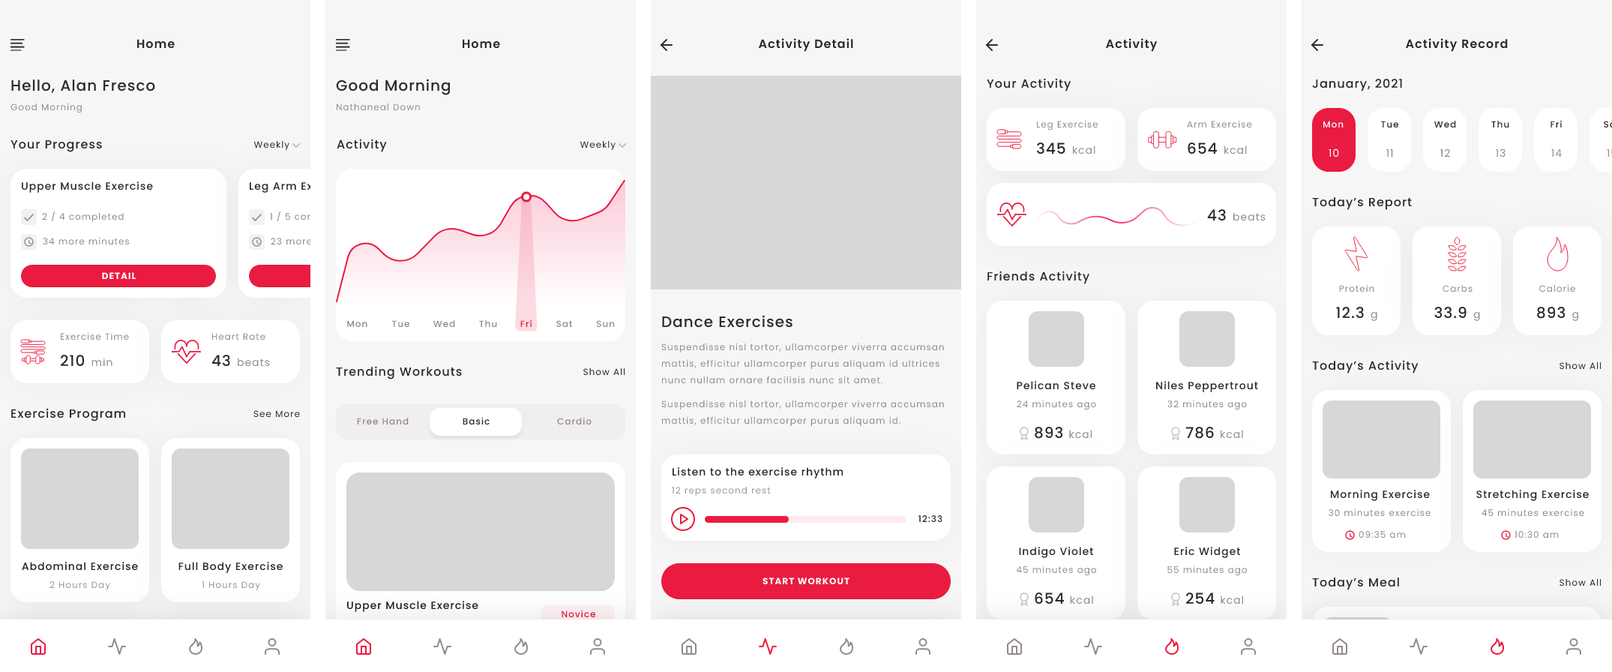
<style>
.page{position:relative;width:1612px;height:672px;background:#ffffff}
.page>*{position:absolute;margin:0}
.t1{font:12px "Poppins-SemiBold";letter-spacing:0.063em;color:#2f2b2c}
.t2{font:12px "Poppins-Medium";letter-spacing:0.063em;color:#2f2b2c}
.t3{font:15px "Poppins-Medium";letter-spacing:0.05em;color:#2f2b2c}
.t4{font:9px "Poppins-Regular";letter-spacing:0.083em;color:#938b8c}
.t5{font:9px "Poppins-Medium";letter-spacing:0.083em;color:#ffffff}
.t6{font:9px "Poppins-Medium";letter-spacing:0.083em;color:#2f2b2c}
.t7{font:9px "Poppins-Regular";letter-spacing:0.083em;color:#2f2b2c}
.t8{font:10.5px "Poppins-Regular";letter-spacing:0.071em;color:#938b8c}
.t9{font:10.5px "Poppins-Regular";letter-spacing:0.071em;color:#ffffff}
.t10{font:10.5px "Poppins-Medium";letter-spacing:0.071em;color:#2f2b2c}
.t11{font:9px "Poppins-Regular";letter-spacing:0.083em;color:#ffffff}
.t12{font:9px "Poppins-Regular";letter-spacing:0.083em}
.t13{font:9px "Poppins-Bold";letter-spacing:0.083em;color:#ffffff;text-transform:uppercase}
.t14{font:9px "Poppins-Medium";letter-spacing:0.083em;color:#938b8c}
.t15{font:9px "Poppins-Medium";letter-spacing:0.083em;color:#ea1b41}
.t16{font:9px/16.5px "Poppins-Regular";letter-spacing:0.083em;color:#938b8c}
.t17{font:10.5px "Poppins-Medium";letter-spacing:0.071em;color:#27272a}
.t18{font:9px "Poppins-Regular";letter-spacing:0.083em;color:#99999f}
.t19{font:10.5px "Poppins-Regular";letter-spacing:0.083em;color:#938b8c}
.t20{font:10.5px "Poppins-Medium";letter-spacing:0.071em;color:#242221}
</style>
<div class="page">
<p class="t1" style="left:136px;top:39px;width:39px;height:10px">Home</p>
<p class="t1" style="left:462px;top:39px;width:38px;height:10px">Home</p>
<p class="t1" style="left:758px;top:38px;width:96px;height:14px">Activity Detail</p>
<p class="t1" style="left:1106px;top:38px;width:52px;height:14px">Activity</p>
<p class="t1" style="left:1406px;top:38px;width:102px;height:14px">Activity Record</p>
<p class="t2" style="left:987px;top:78px;width:85px;height:14px">Your Activity</p>
<p class="t3" style="left:11px;top:80px;width:144px;height:13px">Hello, Alan Fresco</p>
<p class="t3" style="left:336px;top:79px;width:115px;height:16px">Good Morning</p>
<p class="t2" style="left:1312px;top:79px;width:90px;height:13px">January, 2021</p>
<p class="t4" style="left:10px;top:103px;width:72px;height:10px">Good Morning</p>
<p class="t4" style="left:336px;top:104px;width:84px;height:7px">Nathaneal Down</p>
<p class="t4" style="left:1036px;top:120px;width:63px;height:10px">Leg Exercise</p>
<p class="t4" style="left:1187px;top:120px;width:65px;height:8px">Arm Exercise</p>
<p class="t5" style="left:1323px;top:121px;width:21px;height:7px">Mon</p>
<p class="t6" style="left:1381px;top:121px;width:19px;height:7px">Tue</p>
<p class="t6" style="left:1434px;top:121px;width:22px;height:7px">Wed</p>
<p class="t6" style="left:1492px;top:121px;width:18px;height:7px">Thu</p>
<p class="t6" style="left:1551px;top:120px;width:11px;height:8px">Fri</p>
<p class="t2" style="left:10px;top:140px;width:92px;height:12px">Your Progress</p>
<p class="t7" style="left:254px;top:141px;width:36px;height:10px">Weekly</p>
<p class="t2" style="left:337px;top:139px;width:50px;height:13px">Activity</p>
<p class="t7" style="left:580px;top:141px;width:36px;height:10px">Weekly</p>
<p class="t8" style="left:1036px;top:142px;width:60px;height:12px"><span class="t3">345 </span>kcal</p>
<p class="t8" style="left:1188px;top:142px;width:59px;height:12px"><span class="t3">654 </span>kcal</p>
<p class="t9" style="left:1329px;top:148px;width:11px;height:9px">10</p>
<p class="t8" style="left:1387px;top:148px;width:7px;height:9px">11</p>
<p class="t8" style="left:1441px;top:148px;width:9px;height:9px">12</p>
<p class="t8" style="left:1496px;top:148px;width:10px;height:10px">13</p>
<p class="t8" style="left:1552px;top:148px;width:10px;height:9px">14</p>
<p class="t10" style="left:22px;top:182px;width:131px;height:11px">Upper Muscle Exercise</p>
<p class="t10" style="left:250px;top:182px;width:99px;height:11px">Leg Arm Exercise</p>
<p class="t2" style="left:1312px;top:197px;width:100px;height:13px">Today’s Report</p>
<p class="t8" style="left:1208px;top:209px;width:58px;height:12px"><span class="t3">43 </span>beats</p>
<p class="t4" style="left:42px;top:211px;width:82px;height:12px">2 / 4 completed</p>
<p class="t11" style="left:270px;top:211px;width:80px;height:12px">1 / 5 completed</p>
<p class="t4" style="left:43px;top:237px;width:87px;height:8px">34 more minutes</p>
<p class="t12" style="left:271px;top:237px;width:86px;height:8px">23 more minutes</p>
<p class="t13" style="left:102px;top:272px;width:34px;height:7px">Detail</p>
<p class="t2" style="left:988px;top:271px;width:102px;height:13px">Friends Activity</p>
<p class="t4" style="left:1340px;top:284px;width:35px;height:8px">Protein</p>
<p class="t4" style="left:1443px;top:285px;width:30px;height:7px">Carbs</p>
<p class="t4" style="left:1540px;top:284px;width:36px;height:8px">Calorie</p>
<p class="t3" style="left:662px;top:315px;width:131px;height:13px">Dance Exercises</p>
<p class="t3" style="left:1336px;top:307px;width:42px;height:14px">12.3 <span class="t8">g</span></p>
<p class="t3" style="left:1435px;top:307px;width:45px;height:14px">33.9 <span class="t8">g</span></p>
<p class="t3" style="left:1538px;top:307px;width:41px;height:14px">893 <span class="t8">g</span></p>
<p class="t14" style="left:347px;top:320px;width:21px;height:8px">Mon</p>
<p class="t14" style="left:392px;top:320px;width:18px;height:8px">Tue</p>
<p class="t14" style="left:433px;top:320px;width:22px;height:8px">Wed</p>
<p class="t14" style="left:479px;top:320px;width:18px;height:8px">Thu</p>
<p class="t15" style="left:520px;top:320px;width:12px;height:7px">Fri</p>
<p class="t14" style="left:556px;top:320px;width:17px;height:8px">Sat</p>
<p class="t14" style="left:596px;top:320px;width:19px;height:8px">Sun</p>
<p class="t4" style="left:60px;top:332px;width:69px;height:8px">Exercise Time</p>
<p class="t4" style="left:212px;top:333px;width:54px;height:7px">Heart Rate</p>
<p class="t16" style="left:662px;top:343px;width:282px;height:41px">Suspendisse nisl tortor, ullamcorper viverra accumsan mattis, efficitur ullamcorper purus aliquam id ultrices nunc nullam ornare facilisis nunc sit amet.</p>
<p class="t3" style="left:61px;top:355px;width:51px;height:11px">210 <span class="t8">min</span></p>
<p class="t8" style="left:212px;top:355px;width:58px;height:12px"><span class="t3">43 </span>beats</p>
<p class="t2" style="left:336px;top:366px;width:126px;height:14px">Trending Workouts</p>
<p class="t2" style="left:1312px;top:360px;width:107px;height:14px">Today’s Activity</p>
<p class="t7" style="left:1560px;top:362px;width:42px;height:8px">Show All</p>
<p class="t7" style="left:584px;top:368px;width:42px;height:8px">Show All</p>
<p class="t10" style="left:1017px;top:381px;width:79px;height:9px">Pelican Steve</p>
<p class="t10" style="left:1156px;top:381px;width:102px;height:11px">Niles Peppertrout</p>
<p class="t16" style="left:662px;top:400px;width:282px;height:27px">Suspendisse nisl tortor, ullamcorper viverra accumsan mattis, efficitur ullamcorper purus aliquam id.</p>
<p class="t4" style="left:1017px;top:400px;width:79px;height:10px">24 minutes ago</p>
<p class="t4" style="left:1168px;top:400px;width:79px;height:10px">32 minutes ago</p>
<p class="t2" style="left:11px;top:408px;width:115px;height:14px">Exercise Program</p>
<p class="t7" style="left:254px;top:410px;width:46px;height:8px">See More</p>
<p class="t14" style="left:357px;top:418px;width:52px;height:7px">Free Hand</p>
<p class="t6" style="left:463px;top:417px;width:27px;height:8px">Basic</p>
<p class="t14" style="left:557px;top:417px;width:35px;height:8px">Cardio</p>
<p class="t8" style="left:1035px;top:427px;width:58px;height:12px"><span class="t3">893 </span>kcal</p>
<p class="t8" style="left:1186px;top:427px;width:58px;height:12px"><span class="t3">786 </span>kcal</p>
<p class="t17" style="left:673px;top:467px;width:171px;height:11px">Listen to the exercise rhythm</p>
<p class="t18" style="left:672px;top:487px;width:99px;height:9px">12 reps second rest</p>
<p class="t10" style="left:1330px;top:490px;width:100px;height:11px">Morning Exercise</p>
<p class="t10" style="left:1477px;top:490px;width:112px;height:11px">Stretching Exercise</p>
<p class="t4" style="left:1329px;top:508px;width:102px;height:9px">30 minutes exercise</p>
<p class="t4" style="left:1482px;top:508px;width:103px;height:9px">45 minutes exercise</p>
<p class="t6" style="left:919px;top:515px;width:24px;height:8px">12:33</p>
<p class="t4" style="left:1359px;top:531px;width:47px;height:7px">09:35 am</p>
<p class="t4" style="left:1515px;top:531px;width:44px;height:7px">10:30 am</p>
<p class="t10" style="left:1019px;top:547px;width:75px;height:11px">Indigo Violet</p>
<p class="t10" style="left:1174px;top:547px;width:67px;height:11px">Eric Widget</p>
<p class="t17" style="left:22px;top:562px;width:116px;height:9px">Abdominal Exercise</p>
<p class="t17" style="left:178px;top:562px;width:105px;height:11px">Full Body Exercise</p>
<p class="t4" style="left:1016px;top:566px;width:81px;height:10px">45 minutes ago</p>
<p class="t4" style="left:1168px;top:566px;width:80px;height:10px">55 minutes ago</p>
<p class="t18" style="left:50px;top:581px;width:60px;height:10px">2 Hours Day</p>
<p class="t18" style="left:202px;top:581px;width:58px;height:10px">1 Hours Day</p>
<p class="t13" style="left:763px;top:578px;width:87px;height:7px">Start Workout</p>
<p class="t2" style="left:1312px;top:578px;width:88px;height:12px">Today’s Meal</p>
<p class="t7" style="left:1560px;top:579px;width:42px;height:7px">Show All</p>
<p class="t19" style="left:1035px;top:592px;width:59px;height:12px"><span class="t3">654 </span>kcal</p>
<p class="t8" style="left:1186px;top:592px;width:58px;height:12px"><span class="t3">254 </span>kcal</p>
<p class="t20" style="left:347px;top:601px;width:131px;height:11px">Upper Muscle Exercise</p>
<p class="t15" style="left:562px;top:610px;width:34px;height:8px">Novice</p>
</div>
